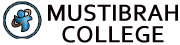
<style>
.page{position:relative;width:180px;height:45px;background:#ffffff}
.page>*{position:absolute;margin:0}
.t1{font:24px/21.7px "Corbel";color:#090101;text-transform:uppercase;font-weight:bold}
</style>
<div class="page">
<p class="t1" style="left:48px;top:4px;width:130px;height:39px;text-align:center">MUSTIBRAH<br>COLLEGE</p>
</div>
